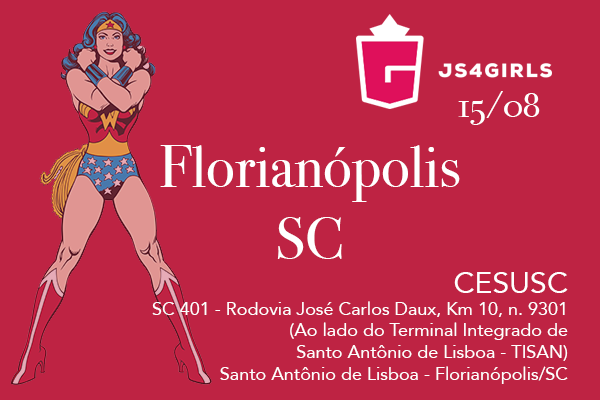
<style>
.page{position:relative;width:600px;height:400px;background:#be2343}
.page>*{position:absolute;margin:0}
.t1{font:36px "BodoniSvtyTwoOSITCTT-Book";color:#ffffff}
.t2{font:60px "BodoniSvtyTwoOSITCTT-Book";color:#ffffff}
.t3{font:18px "Avenir-Roman";color:#ffffff}
.t4{font:30px "Avenir-Roman";color:#ffffff}
</style>
<div class="page">
<p class="t1" style="left:458px;top:91px;width:82px;height:34px">15/08</p>
<p class="t2" style="left:160px;top:145px;width:300px;height:114px;text-align:center">Florianópolis<br>SC</p>
<p class="t3" style="left:152px;top:272px;width:416px;height:112px;text-align:right"><span class="t4">CESUSC<br></span>SC 401 - Rodovia José Carlos Daux, Km 10, n. 9301<br>(Ao lado do Terminal Integrado de <br>Santo Antônio de Lisboa - TISAN)<br>Santo Antônio de Lisboa - Florianópolis/SC</p>
</div>
